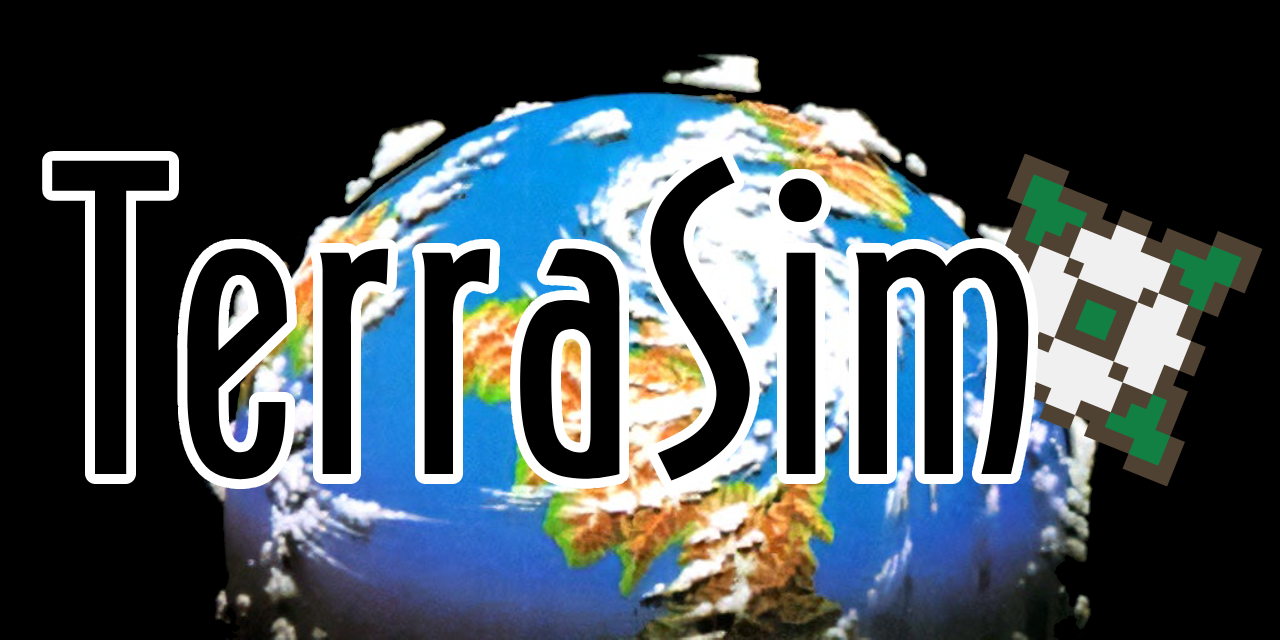
<style>
.page{position:relative;width:1280px;height:640px;background:#000000}
.page>*{position:absolute;margin:0}
.t1{font:400px "NewPortLandOpti-Regular";color:#000000}
</style>
<div class="page">
<p class="t1" style="left:52px;top:156px;width:979px;height:328px">TerraSim</p>
</div>
